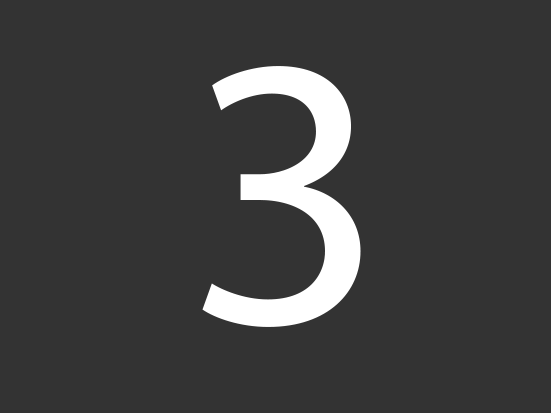
<style>
.page{position:relative;width:551px;height:413px;background:#333333}
.page>*{position:absolute;margin:0}
.t1{font:388.9px "MyriadHebrew-Regular";color:#ffffff}
</style>
<div class="page">
<p class="t1" style="left:202px;top:66px;width:159px;height:261px">3</p>
</div>
